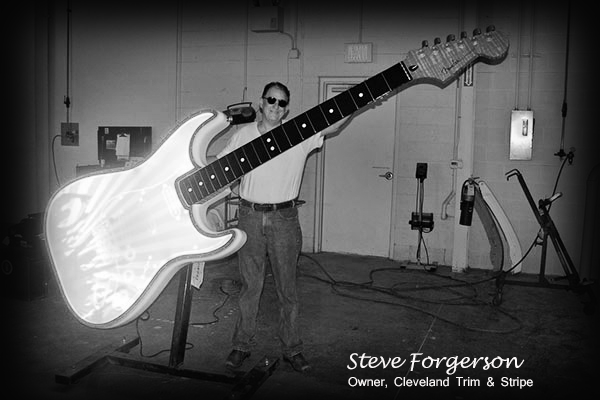
<style>
.page{position:relative;width:600px;height:400px}
.page>*{position:absolute;margin:0}
.t1{font:20px "LucidaHandwriting-Italic";color:#fcf9f9}
.t2{font:12px "Mangal";color:#fcf9f9}
</style>
<div class="page">
<p class="t1" style="left:347px;top:353px;width:178px;height:22px">Steve Forgerson</p>
<p class="t2" style="left:348px;top:377px;width:185px;height:12px">Owner, Cleveland Trim &amp; Stripe</p>
</div>
